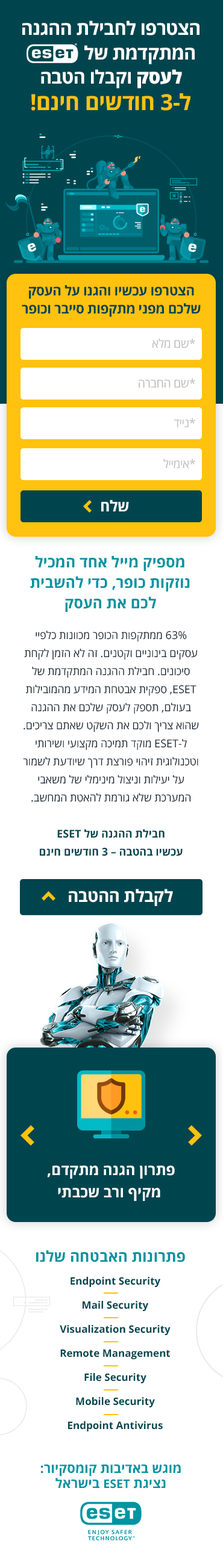
<style>
.page{position:relative;width:223px;height:1568px;background:#ffffff}
.page>*{position:absolute;margin:0}
.t1{font:18.5px/24.3px "OpenSansHebrew-Bold";letter-spacing:-0.02em;color:#ffffff}
.t2{font:18.5px/24.3px "OpenSansHebrew-Bold";letter-spacing:-0.02em;color:#00454e}
.t3{font:18.5px/24.3px "OpenSansHebrew-ExtraBold";letter-spacing:-0.02em;color:#ffffff}
.t4{font:22.1px "OpenSansHebrew-Bold";letter-spacing:-0.02em;color:#ffc20e}
.t5{font:22.1px "OpenSansHebrew-Bold";letter-spacing:0.04em;color:#ffc20e}
.t6{font:13.5px/17.8px "OpenSansHebrew-Bold";letter-spacing:-0.02em;color:#00454e}
.t7{font:12px "OpenSansHebrew-Regular";letter-spacing:-0.02em;color:#bebebe}
.t8{font:15.1px "OpenSansHebrew-Bold";letter-spacing:-0.02em;color:#ffffff}
.t9{font:15px/20.5px "OpenSansHebrew-Bold";color:#0094a1}
.t10{font:10.8px/18.1px "OpenSansHebrew-Regular";color:#17232f}
.t11{font:10.8px/18.1px "OpenSansHebrew-Bold";color:#00454e}
.t12{font:16.9px "OpenSansHebrew-Bold";letter-spacing:-0.02em;color:#ffffff}
.t13{font:14.7px/22.1px "OpenSansHebrew-Bold";color:#ffffff}
.t14{font:15px "OpenSansHebrew-Bold";color:#0094a1}
.t15{font:10.3px/24.1px "OpenSansHebrew-Bold";color:#00454e}
.t16{font:13.2px/15.4px "OpenSansHebrew-Bold";color:#0094a1}
.t17{font:11.9px/15.4px "OpenSansHebrew-Bold";color:#0094a1}
</style>
<div class="page">
<p class="t1" style="left:22px;top:20px;width:177px;height:68px;text-align:center">הצטרפו לחבילת ההגנה <br>המתקדמת של<span class="t2">    ESET<br></span><span class="t3">לעסק</span> וקבלו הטבה</p>
<p class="t4" style="left:31px;top:93px;width:159px;height:18px">ל-<span class="t5">3</span> חודשים חינם!</p>
<p class="t6" style="left:22px;top:285px;width:178px;height:32px;text-align:center">הצטרפו עכשיו והגנו על העסק<br>שלכם מפני מתקפות סייבר וכופר</p>
<p class="t7" style="left:152px;top:338px;width:43px;height:10px">*שם מלא</p>
<p class="t7" style="left:138px;top:378px;width:57px;height:10px">*שם החברה</p>
<p class="t7" style="left:173px;top:418px;width:22px;height:10px">*נייד</p>
<p class="t7" style="left:163px;top:458px;width:32px;height:11px">*אימייל</p>
<p class="t8" style="left:101px;top:500px;width:28px;height:11px">שלח</p>
<p class="t9" style="left:30px;top:556px;width:160px;height:56px;text-align:center">מספיק מייל אחד המכיל נוזקות כופר, כדי להשבית לכם את העסק</p>
<p class="t10" style="left:23px;top:631px;width:176px;height:225px;text-align:center">63% ממתקפות הכופר מכוונות כלפיי עסקים בינוניים וקטנים. זה לא הזמן לקחת סיכונים. חבילת ההגנה המתקדמת של ESET, ספקית אבטחת המידע מהמובילות בעולם, תספק לעסק שלכם את ההגנה שהוא צריך ולכם את השקט שאתם צריכים. ל-ESET מוקד תמיכה מקצועי ושירותי וטכנולוגית זיהוי פורצת דרך שיודעת לשמור על יעילות וניצול מינימלי של משאבי המערכת שלא גורמת להאטת המחשב.<br><br><span class="t11">חבילת ההגנה של ESET<br>עכשיו בהטבה – 3 חודשים חינם</span></p>
<p class="t12" style="left:69px;top:889px;width:104px;height:17px">לקבלת ההטבה</p>
<p class="t13" style="left:47px;top:1165px;width:127px;height:36px;text-align:center">פתרון הגנה מתקדם,<br> מקיף ורב שכבתי</p>
<p class="t14" style="left:36px;top:1250px;width:149px;height:12px">פתרונות האבטחה שלנו</p>
<p class="t15" style="left:60px;top:1277px;width:110px;height:154px;text-align:center">Endpoint Security<br>Mail Security<br>Visualization Security<br>Remote Management<br>File Security<br>Mobile Security<br>Endpoint Antivirus</p>
<p class="t16" style="left:40px;top:1465px;width:141px;height:24px;text-align:center">מוגש באדיבות קומסקיור:<br>נציגת <span class="t17">ESET</span> בישראל</p>
</div>
